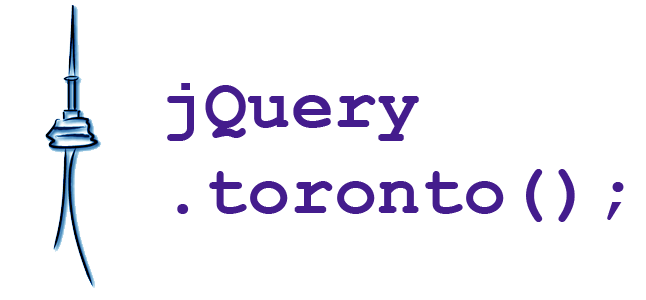
<style>
.page{position:relative;width:646px;height:300px;background:#ffffff}
.page>*{position:absolute;margin:0}
.t1{font:72px "CourierNewPS-BoldMT";color:#441c8d}
</style>
<div class="page">
<p class="t1" style="left:167px;top:83px;width:457px;height:139px">jQuery<br>.toronto();</p>
</div>
